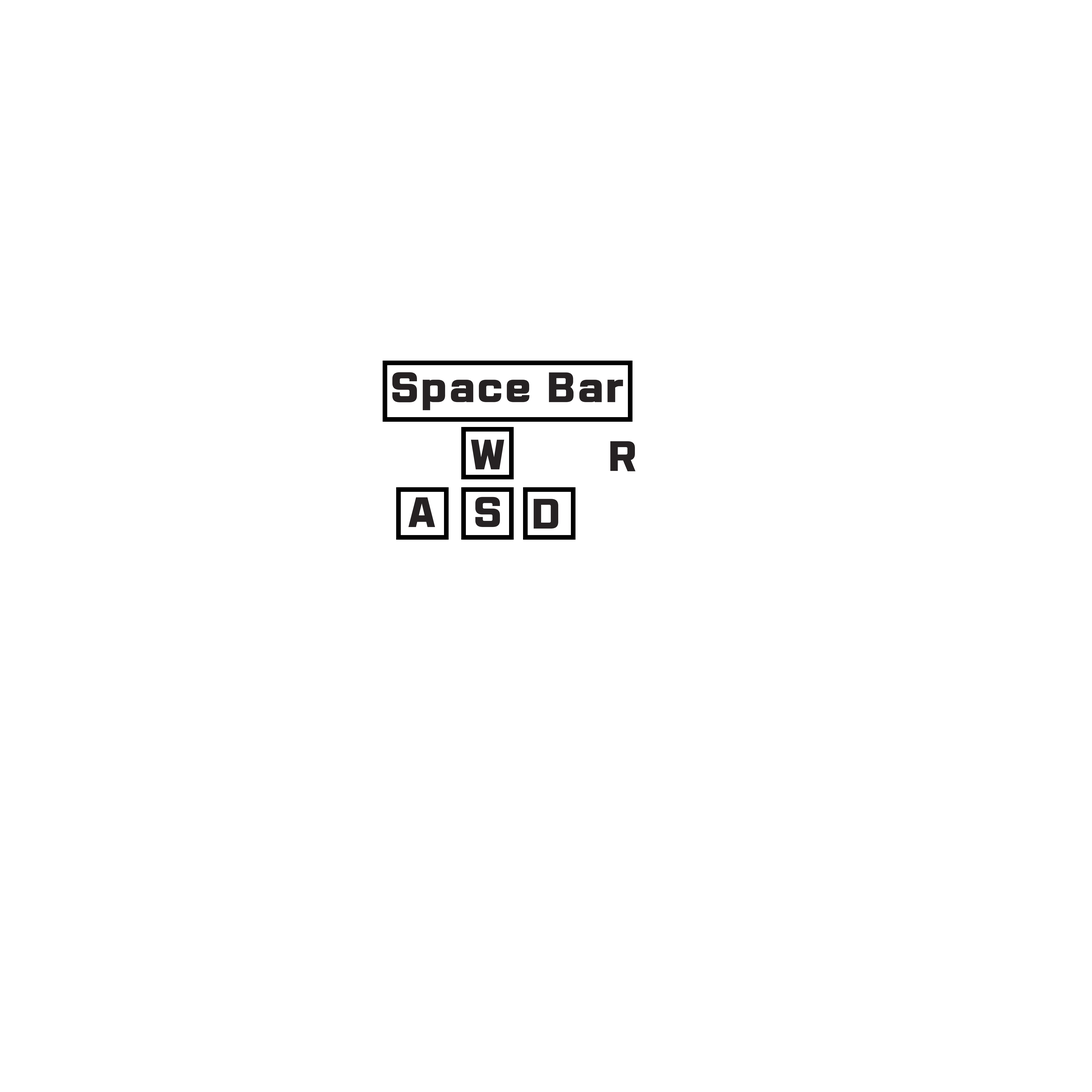
<style>
.page{position:relative;width:1092px;height:1092px;background:#ffffff}
.page>*{position:absolute;margin:0}
.t1{font:37px "Typo_SsangmunDong_B";letter-spacing:0.075em;color:#262223}
</style>
<div class="page">
<p class="t1" style="left:392px;top:372px;width:231px;height:38px">Space Bar</p>
<p class="t1" style="left:471px;top:440px;width:33px;height:30px">W</p>
<p class="t1" style="left:610px;top:441px;width:26px;height:30px">R</p>
<p class="t1" style="left:408px;top:497px;width:27px;height:30px">A</p>
<p class="t1" style="left:475px;top:497px;width:25px;height:30px">S</p>
<p class="t1" style="left:534px;top:499px;width:24px;height:30px">D</p>
</div>
